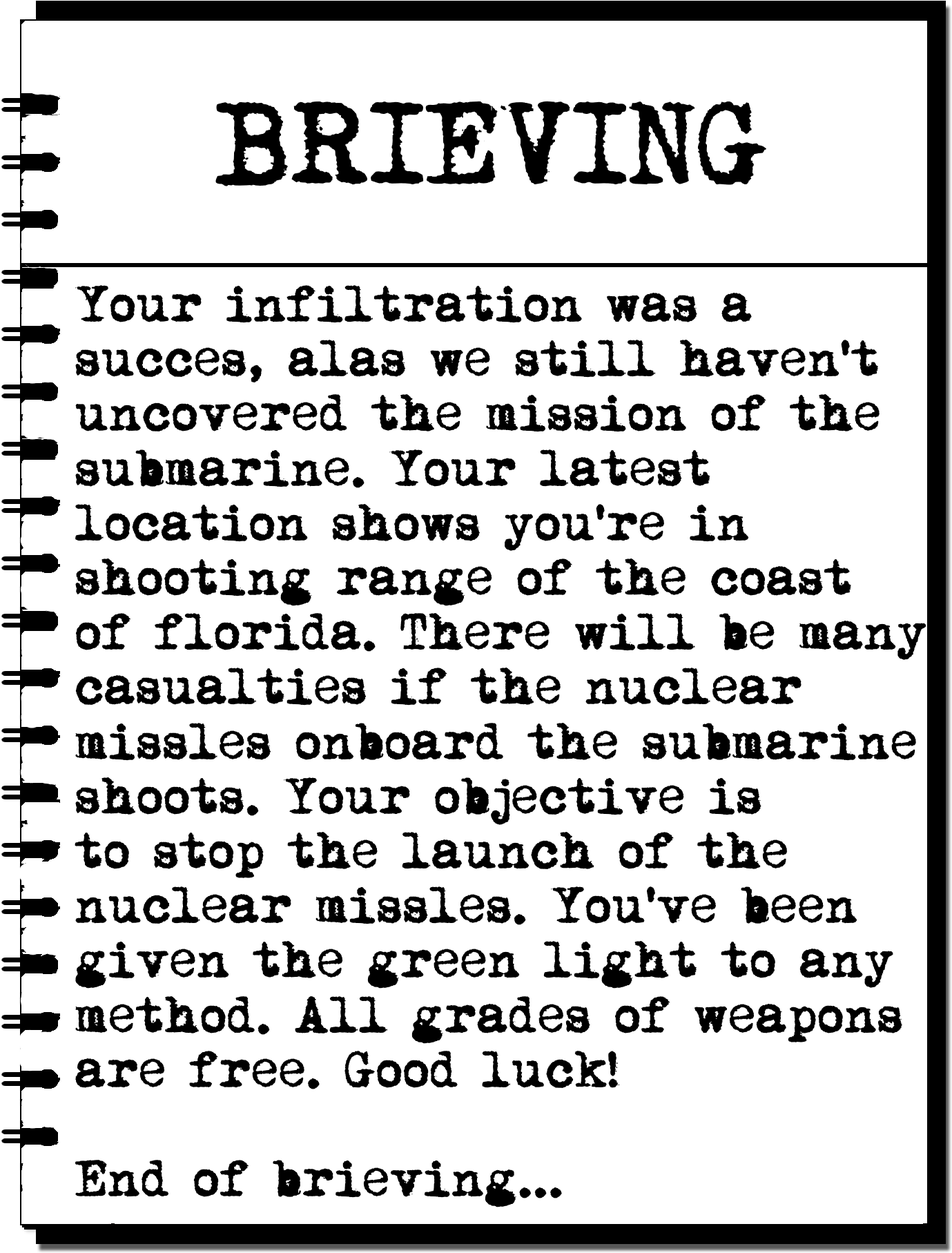
<style>
.page{position:relative;width:952px;height:1253px;background:#ffffff}
.page>*{position:absolute;margin:0}
.t1{font:103.5px "MomsTypewriter";color:#000000}
.t2{font:45.6px "MomsTypewriter";color:#000000}
</style>
<div class="page">
<p class="t1" style="left:215px;top:101px;width:551px;height:85px">BRIEVING</p>
<p class="t2" style="left:75px;top:285px;width:851px;height:922px">Your infiltration was a <br>succes, alas we still haven't <br>uncovered the mission of the <br>submarine. Your latest <br>location shows you're in<br>shooting range of the coast<br>of florida. There will be many<br>casualties if the nuclear<br>missles onboard the submarine<br>shoots. Your objective is<br>to stop the launch of the <br>nuclear missles. You've been<br>given the green light to any<br>method. All grades of weapons<br>are free. Good luck!<br><br>End of brieving...</p>
</div>
